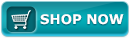
<style>
.page{position:relative;width:130px;height:38px}
.page>*{position:absolute;margin:0}
.t1{font:13.2px "Verdana-Bold";color:#ffffff}
</style>
<div class="page">
<p class="t1" style="left:40px;top:14px;width:84px;height:11px">SHOP NOW</p>
</div>
